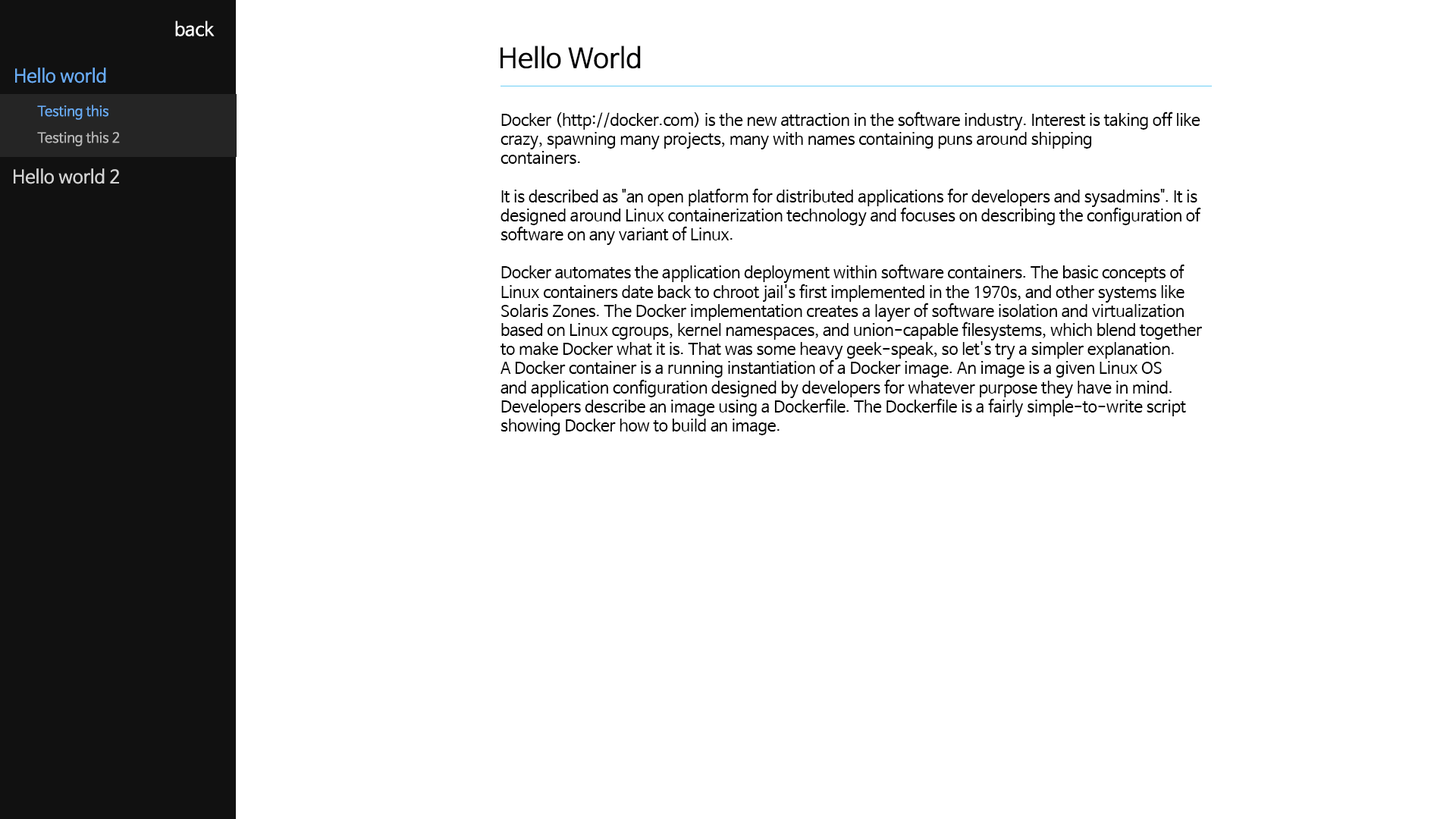
<style>
.page{position:relative;width:1456px;height:819px;background:#ffffff}
.page>*{position:absolute;margin:0}
.t1{font:18.2px "NanumBarunGothic";color:#fefefe}
.t2{font:27.3px "NanumBarunGothic";color:#000001}
.t3{font:18.2px "NanumBarunGothic";color:#69abf3}
.t4{font:13.6px "NanumBarunGothic";color:#69abf3}
.t5{font:15.9px "NanumBarunGothic";color:#000000}
.t6{font:13.6px "NanumBarunGothic";color:#b8b8b8}
.t7{font:18.2px "NanumBarunGothic";color:#d3d3d3}
</style>
<div class="page">
<p class="t1" style="left:175px;top:20px;width:40px;height:16px">back</p>
<p class="t2" style="left:500px;top:45px;width:141px;height:24px">Hello World</p>
<p class="t3" style="left:15px;top:67px;width:91px;height:16px">Hello world</p>
<p class="t4" style="left:37px;top:105px;width:71px;height:15px">Testing this</p>
<p class="t5" style="left:500px;top:111px;width:702px;height:324px">Docker (http://docker.com) is the new attraction in the software industry. Interest is taking off like crazy, spawning many projects, many with names containing puns around shipping <br>containers.<br><br>It is described as "an open platform for distributed applications for developers and sysadmins". It is designed around Linux containerization technology and focuses on describing the configuration of software on any variant of Linux.<br><br>Docker automates the application deployment within software containers. The basic concepts of Linux containers date back to chroot jail's first implemented in the 1970s, and other systems like Solaris Zones. The Docker implementation creates a layer of software isolation and virtualization based on Linux cgroups, kernel namespaces, and union-capable filesystems, which blend together to make Docker what it is. That was some heavy geek-speak, so let's try a simpler explanation. A Docker container is a running instantiation of a Docker image. An image is a given Linux OS and application configuration designed by developers for whatever purpose they have in mind. Developers describe an image using a Dockerfile. The Dockerfile is a fairly simple-to-write script showing Docker how to build an image.</p>
<p class="t6" style="left:37px;top:131px;width:83px;height:15px">Testing this 2</p>
<p class="t7" style="left:14px;top:168px;width:105px;height:16px">Hello world 2</p>
</div>
